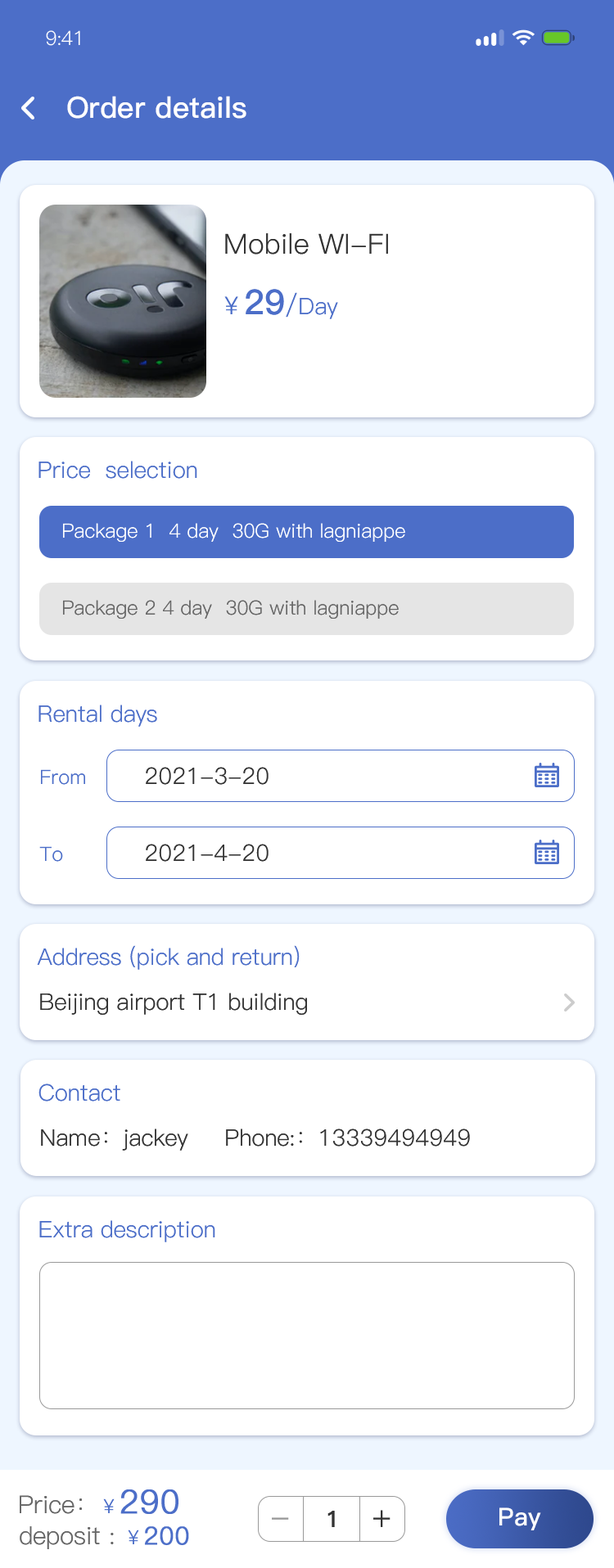
<style>
.page{position:relative;width:614px;height:1568px;background:#ffffff}
.page>*{position:absolute;margin:0}
.t1{font:19.6px "PingFang-SC-Regular";letter-spacing:-0.025em;color:#ffffff}
.t2{font:29.5px "PingFang-SC-Bold";color:#ffffff}
.t3{font:27.8px "PingFang-SC-Regular";color:#333333}
.t4{font:22.9px "PingFang-SC-Regular";color:#4c6ec8}
.t5{font:24.6px "PingFang-SC-Regular";color:#4c6ec8}
.t6{font:34.4px "PingFang-SC-Bold";color:#4c6ec8}
.t7{font:26.2px "PingFang-SC-Regular";color:#4c6ec8}
.t8{font:19.6px "PingFang-SC-Regular";color:#ffffff}
.t9{font:19.6px "PingFang-SC-Regular";color:#666666}
.t10{font:19.6px "PingFang-SC-Regular";color:#4c6ec8}
.t11{font:22.9px "PingFang-SC-Regular";color:#333333}
.t12{font:24.6px "PingFang-SC-Regular";color:#666666}
.t13{font:32.7px "PingFang-SC-Regular";color:#4c6ec8;font-weight:bold}
.t14{font:32.7px "PingFang-SC-Regular";color:#999999}
.t15{font:22.9px "PingFang-SC-Bold";color:#333333}
.t16{font:32.7px "PingFang-SC-Regular";color:#333333}
.t17{font:24.6px "PingFang-SC-Bold";color:#ffffff}
.t18{font:24.6px "PingFang-SC-Regular";color:#4c6ec8;font-weight:bold}
</style>
<div class="page">
<p class="t1" style="left:46px;top:30px;width:34px;height:16px">9:41</p>
<p class="t2" style="left:67px;top:96px;width:179px;height:23px">Order details</p>
<p class="t3" style="left:225px;top:233px;width:163px;height:22px">Mobile WI-FI</p>
<p class="t4" style="left:224px;top:289px;width:114px;height:30px"><span class="t5">￥</span><span class="t6">29</span><span class="t7">/</span>Day</p>
<p class="t4" style="left:38px;top:461px;width:159px;height:18px">Price  selection</p>
<p class="t8" style="left:63px;top:523px;width:342px;height:19px">Package 1  4 day  30G with lagniappe</p>
<p class="t9" style="left:63px;top:600px;width:336px;height:19px">Package 2 4 day  30G with lagniappe</p>
<p class="t4" style="left:38px;top:705px;width:119px;height:22px">Rental days</p>
<p class="t10" style="left:41px;top:769px;width:44px;height:16px">From</p>
<p class="t11" style="left:146px;top:767px;width:122px;height:18px">2021-3-20</p>
<p class="t11" style="left:146px;top:844px;width:122px;height:18px">2021-4-20</p>
<p class="t10" style="left:39px;top:846px;width:24px;height:16px">To</p>
<p class="t4" style="left:37px;top:945px;width:263px;height:25px">Address (pick and return)</p>
<p class="t11" style="left:40px;top:993px;width:267px;height:22px">Beijing airport T1 building</p>
<p class="t4" style="left:38px;top:1084px;width:82px;height:18px">Contact</p>
<p class="t11" style="left:41px;top:1129px;width:429px;height:22px">Name：jackey     Phone:：13339494949</p>
<p class="t4" style="left:39px;top:1220px;width:176px;height:22px">Extra description</p>
<p class="t12" style="left:20px;top:1489px;width:158px;height:25px">Price：<span class="t10">￥</span><span class="t13">290</span></p>
<p class="t14" style="left:272px;top:1517px;width:17px;height:3px">-</p>
<p class="t15" style="left:327px;top:1511px;width:8px;height:16px">1</p>
<p class="t16" style="left:373px;top:1510px;width:17px;height:17px">+</p>
<p class="t17" style="left:499px;top:1507px;width:42px;height:23px">Pay</p>
<p class="t12" style="left:20px;top:1526px;width:169px;height:23px">deposit : <span class="t10">￥</span><span class="t18">200</span></p>
</div>
